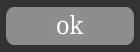
<style>
.page{position:relative;width:140px;height:52px;background:#8d8d8d}
.page>*{position:absolute;margin:0}
.t1{font:25px "DejaVuSerifCondensed";color:#ffffff}
</style>
<div class="page">
<p class="t1" style="left:57px;top:15px;width:27px;height:20px">ok</p>
</div>
